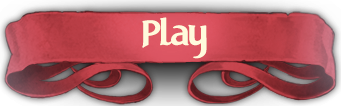
<style>
.page{position:relative;width:341px;height:106px}
.page>*{position:absolute;margin:0}
.t1{font:36px "DragonFire";color:#fffadc;font-weight:bold}
</style>
<div class="page">
<p class="t1" style="left:142px;top:17px;width:65px;height:42px">Play</p>
</div>
